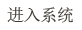
<style>
.page{position:relative;width:82px;height:30px;background:#ffffff}
.page>*{position:absolute;margin:0}
.t1{font:16.7px "SimSun";color:#3d3935}
</style>
<div class="page">
<p class="t1" style="left:7px;top:7px;width:66px;height:16px">进入系统</p>
</div>
